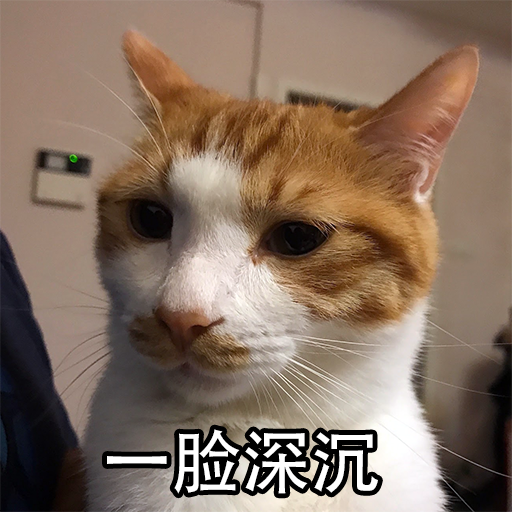
<style>
.page{position:relative;width:512px;height:512px}
.page>*{position:absolute;margin:0}
.t1{font:69.7px "AdobeHeitiStd-Regular";color:#ffffff}
</style>
<div class="page">
<p class="t1" style="left:107px;top:429px;width:271px;height:65px">一脸深沉</p>
</div>
